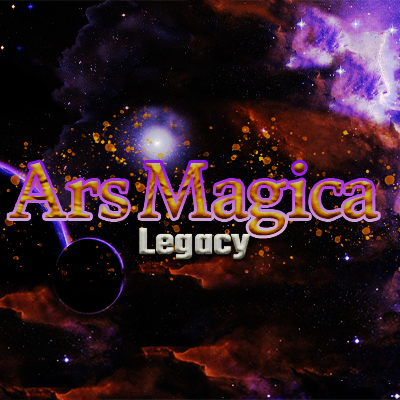
<style>
.page{position:relative;width:400px;height:400px}
.page>*{position:absolute;margin:0}
.t1{font:71.9px "DonegalOne-Regular"}
.t2{font:38.5px "Teko-Bold";scale:1.06 1}
</style>
<div class="page">
<p class="t1" style="left:9px;top:162px;width:369px;height:74px">Ars Magica</p>
<p class="t2" style="left:139px;top:228px;width:111px;height:31px">Legacy</p>
</div>
